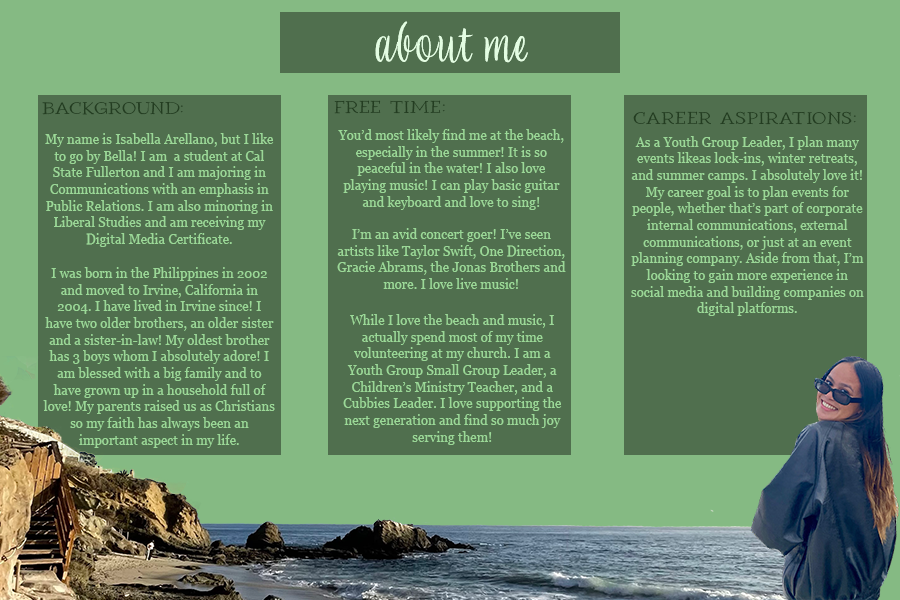
<style>
.page{position:relative;width:900px;height:600px;background:#506f4e}
.page>*{position:absolute;margin:0}
.t1{font:58.3px "LiebeGerda-Regular";letter-spacing:0.025em;color:#e3fde2}
.t2{font:16.7px "ROMANA";letter-spacing:0.025em;color:#233d21}
.t3{font:12.5px/16.7px "Georgia";letter-spacing:0.025em;color:#9bd897}
</style>
<div class="page">
<p class="t1" style="left:375px;top:21px;width:153px;height:42px">about me</p>
<p class="t2" style="left:42px;top:101px;width:141px;height:14px">background:</p>
<p class="t2" style="left:334px;top:100px;width:111px;height:14px">Free Time:</p>
<p class="t2" style="left:633px;top:111px;width:223px;height:14px">career aspirations:</p>
<p class="t3" style="left:45px;top:133px;width:229px;height:114px;text-align:center">My name is Isabella Arellano, but I like to go by Bella! I am  a student at Cal State Fullerton and I am majoring in Communications with an emphasis in Public Relations. I am also minoring in Liberal Studies and am receiving my Digital Media Certificate.</p>
<p class="t3" style="left:338px;top:129px;width:226px;height:81px;text-align:center">You’d most likely find me at the beach, especially in the summer! It is so peaceful in the water! I also love playing music! I can play basic guitar and keyboard and love to sing!</p>
<p class="t3" style="left:631px;top:136px;width:233px;height:180px;text-align:center">As a Youth Group Leader, I plan many events likeas lock-ins, winter retreats, and summer camps. I absolutely love it! My career goal is to plan events for people, whether that’s part of corporate internal communications, external communications, or just at an event planning company. Aside from that, I’m looking to gain more experience in social media and building companies on digital platforms.</p>
<p class="t3" style="left:337px;top:228px;width:229px;height:61px;text-align:center">I’m an avid concert goer! I’ve seen artists like Taylor Swift, One Direction, Gracie Abrams, the Jonas Brothers and more. I love live music!</p>
<p class="t3" style="left:43px;top:267px;width:232px;height:181px;text-align:center">I was born in the Philippines in 2002 and moved to Irvine, California in 2004. I have lived in Irvine since! I have two older brothers, an older sister and a sister-in-law! My oldest brother has 3 boys whom I absolutely adore! I am blessed with a big family and to have grown up in a household full of love! My parents raised us as Christians so my faith has always been an important aspect in my life.</p>
<p class="t3" style="left:343px;top:314px;width:219px;height:131px;text-align:center">While I love the beach and music, I actually spend most of my time volunteering at my church. I am a Youth Group Small Group Leader, a Children’s Ministry Teacher, and a Cubbies Leader. I love supporting the next generation and find so much joy serving them!</p>
</div>
